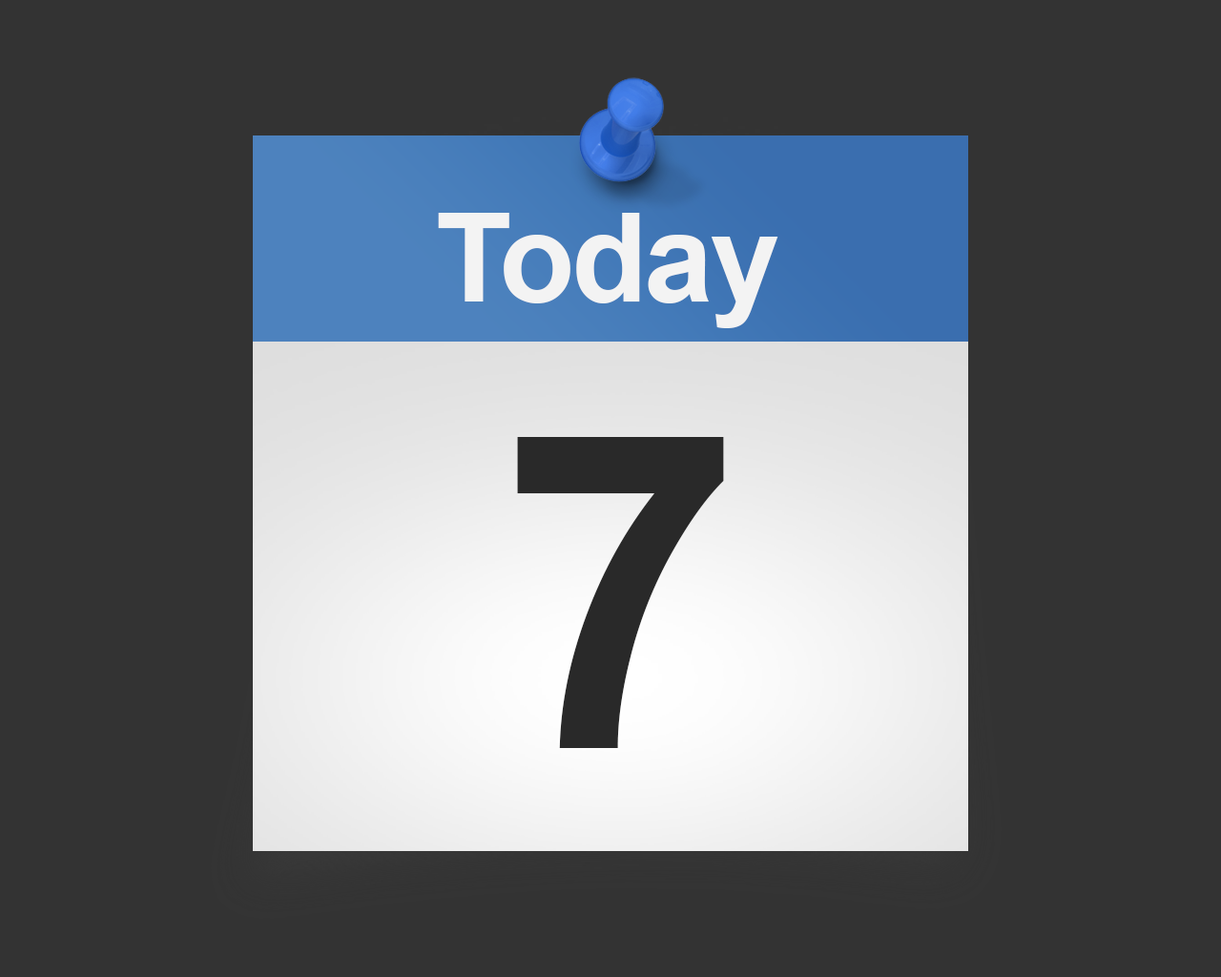
<style>
.page{position:relative;width:1221px;height:977px;background:#333333}
.page>*{position:absolute;margin:0}
.t1{font:124px "Arial-BoldMT";letter-spacing:-0.025em;color:#f3f3f3}
.t2{font:438.8px "Arial-BoldMT";letter-spacing:-0.025em;color:#292929}
</style>
<div class="page">
<p class="t1" style="left:438px;top:213px;width:340px;height:115px">Today</p>
<p class="t2" style="left:517px;top:437px;width:207px;height:311px">7</p>
</div>
